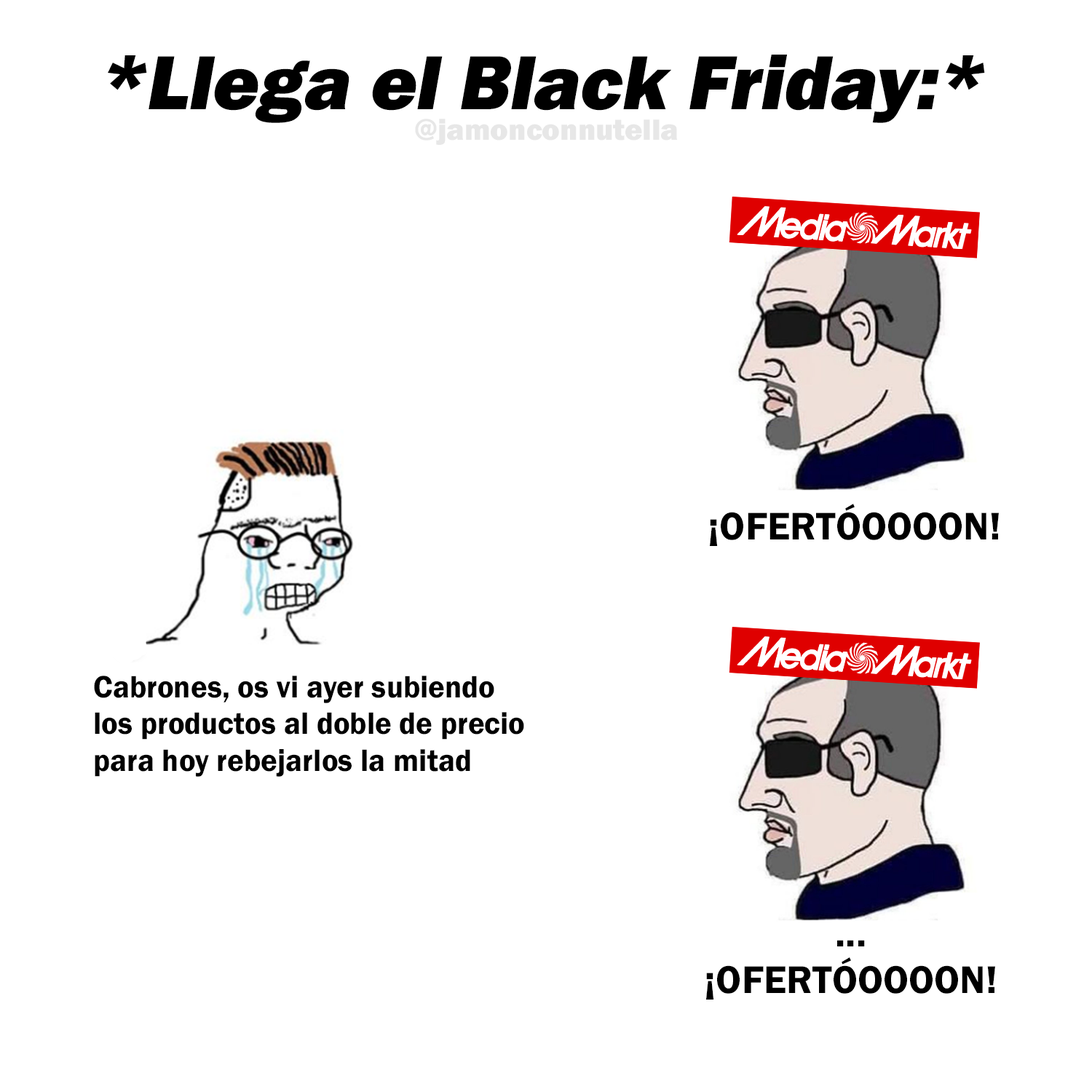
<style>
.page{position:relative;width:1092px;height:1092px;background:#ffffff}
.page>*{position:absolute;margin:0}
.t1{font:79.1px "FranklinGothic-Heavy";color:#000000;font-style:italic}
.t2{font:30.3px "FranklinGothic-Heavy";color:#e7e7e7}
.t3{font:39.9px "FranklinGothic-Demi";color:#000000}
.t4{font:32.1px "FranklinGothic-Demi";color:#000000;scale:0.97 1}
</style>
<div class="page">
<p class="t1" style="left:108px;top:55px;width:877px;height:68px">*Llega el Black Friday:*</p>
<p class="t2" style="left:415px;top:119px;width:263px;height:26px">@jamonconnutella</p>
<p class="t3" style="left:710px;top:504px;width:289px;height:42px">¡OFERTÓOOOON!</p>
<p class="t4" style="left:94px;top:676px;width:430px;height:101px">Cabrones, os vi ayer subiendo<br>los productos al doble de precio<br>para hoy rebejarlos la mitad</p>
<p class="t3" style="left:706px;top:940px;width:289px;height:60px;text-align:center">...<br>¡OFERTÓOOOON!</p>
</div>
